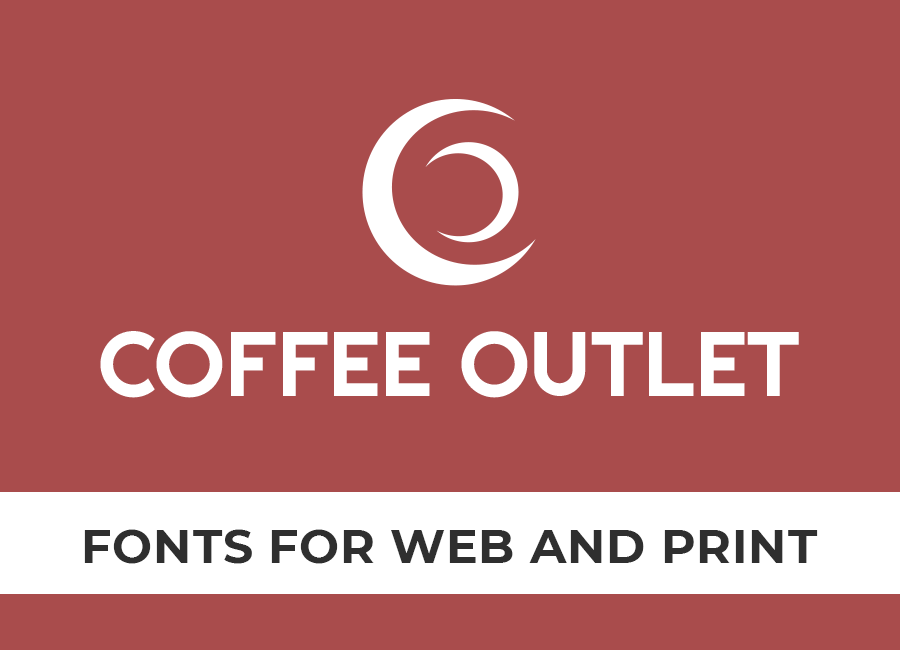
<style>
.page{position:relative;width:900px;height:650px;background:#a94c4c}
.page>*{position:absolute;margin:0}
.t1{font:47.4px "Montserrat-Bold";letter-spacing:0.02em;color:#2f2f2f;text-transform:uppercase}
</style>
<div class="page">
<p class="t1" style="left:84px;top:529px;width:734px;height:35px">fonts for web and print</p>
</div>
